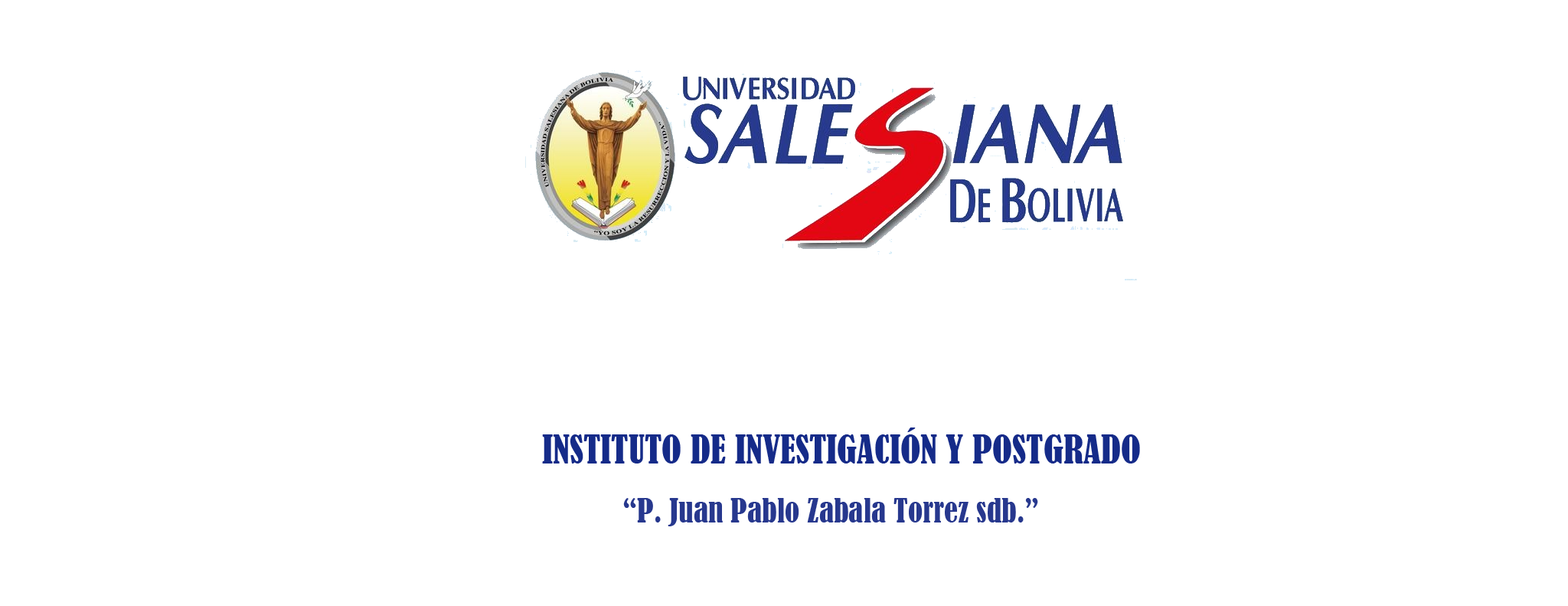
<style>
.page{position:relative;width:1568px;height:606px;background:#ffffff}
.page>*{position:absolute;margin:0}
.t1{font:36.7px "BernardMT-Condensed";color:#152b89}
.t2{font:30.6px "BernardMT-Condensed";color:#27388e}
</style>
<div class="page">
<p class="t1" style="left:542px;top:427px;width:598px;height:36px">INSTITUTO DE INVESTIGACIÓN Y POSTGRADO</p>
<p class="t2" style="left:623px;top:498px;width:415px;height:28px">“P. Juan Pablo Zabala Torrez sdb.”</p>
</div>
